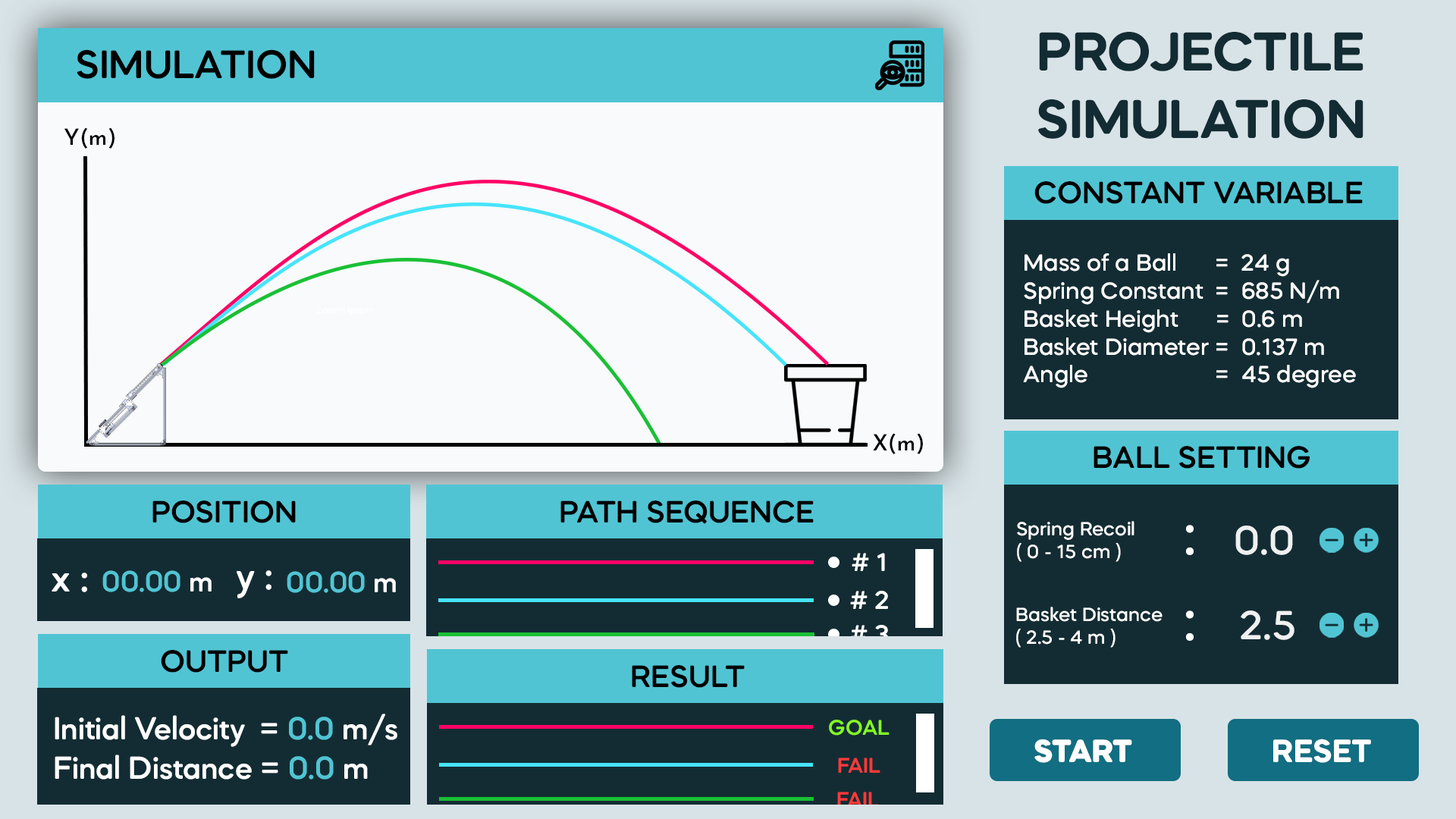
<style>
.page{position:relative;width:1456px;height:819px;background:#f8fafb}
.page>*{position:absolute;margin:0}
.t1{font:56.4px "MazzardSoftM-Bold";color:#132c33}
.t2{font:41px "MazzardSoftM-SemiBold";color:#000000}
.t3{font:22.5px "JosefinSans-Medium";color:#000000}
.t4{font:31.9px "MazzardSoftM-SemiBold";color:#000000}
.t5{font:23.2px "MazzardSoftH-Medium";color:#ffffff}
.t6{font:9.1px "MazzardSoftH-Medium";color:#ffffff}
.t7{font:19px "MazzardSoftH-Medium";color:#ffffff}
.t8{font:54.9px "MazzardSoftH-Medium";color:#ffffff}
.t9{font:40.3px "MazzardSoftH-Medium";color:#ffffff}
.t10{font:26.4px "MazzardSoftM-SemiBold";color:#ffffff}
.t11{font:40.4px "MazzardSoftM-SemiBold";color:#ffffff}
.t12{font:30.3px "MazzardSoftM-SemiBold";color:#51c4d3}
.t13{font:30.3px "MazzardSoftM-SemiBold";color:#ffffff}
.t14{font:26.4px "MazzardSoftM-SemiBold"}
.t15{font:32.9px "MazzardSoftM-SemiBold";color:#ffffff}
.t16{font:32.9px "MazzardSoftM-SemiBold";color:#51c4d3}
.t17{font:22px "MazzardSoftM-SemiBold";color:#84fa24}
.t18{font:32.1px "MazzardSoftH-ExtraBold";color:#ffffff}
.t19{font:32.1px "MazzardSoftH-Bold";color:#ffffff}
.t20{font:22px "MazzardSoftM-SemiBold";color:#fe3a3a}
.t21{font:22px "MazzardSoftM-SemiBold";color:#ff3939}
</style>
<div class="page">
<p class="t1" style="left:1038px;top:32px;width:325px;height:107px;text-align:center">PROJECTILE<br>SIMULATION</p>
<p class="t2" style="left:77px;top:49px;width:238px;height:30px">SIMULATION</p>
<p class="t3" style="left:64px;top:127px;width:51px;height:22px">Y(m)</p>
<p class="t4" style="left:1034px;top:181px;width:329px;height:23px">CONSTANT VARIABLE</p>
<p class="t5" style="left:1023px;top:253px;width:333px;height:135px">Mass of a Ball      =  24 g<br>Spring Constant  =  685 N/m<br>Basket Height      =  0.6 m<br>Basket Diameter =  0.137 m<br>Angle                     =  45 degree</p>
<p class="t6" style="left:317px;top:306px;width:57px;height:9px">Lorem Ipsum</p>
<p class="t3" style="left:873px;top:433px;width:50px;height:21px">X(m)</p>
<p class="t4" style="left:1094px;top:446px;width:216px;height:23px">BALL SETTING</p>
<p class="t4" style="left:152px;top:500px;width:144px;height:23px">POSITION</p>
<p class="t4" style="left:560px;top:500px;width:254px;height:24px">PATH SEQUENCE</p>
<p class="t7" style="left:1017px;top:521px;width:117px;height:41px">Spring Recoil <br>( 0 - 15 cm )</p>
<p class="t8" style="left:1186px;top:525px;width:8px;height:30px">:</p>
<p class="t9" style="left:1235px;top:526px;width:58px;height:29px;opacity:0.9">0.0</p>
<p class="t10" style="left:852px;top:553px;width:33px;height:18px"># 1</p>
<p class="t11" style="left:52px;top:573px;width:35px;height:19px">x :</p>
<p class="t12" style="left:102px;top:570px;width:110px;height:22px">00.00<span class="t13"> m</span></p>
<p class="t11" style="left:237px;top:570px;width:34px;height:28px">y :</p>
<p class="t12" style="left:287px;top:571px;width:109px;height:22px">00.00<span class="t13"> m</span></p>
<p class="t10" style="left:850px;top:591px;width:38px;height:18px"># 2</p>
<p class="t7" style="left:1016px;top:607px;width:147px;height:41px">Basket Distance <br>( 2.5 - 4 m )</p>
<p class="t8" style="left:1186px;top:610px;width:8px;height:31px">:</p>
<p class="t9" style="left:1241px;top:610px;width:53px;height:30px;opacity:0.9">2.5</p>
<p class="t14" style="left:850px;top:625px;width:39px;height:19px"># 3</p>
<p class="t4" style="left:161px;top:650px;width:127px;height:23px">OUTPUT</p>
<p class="t4" style="left:632px;top:665px;width:113px;height:23px">RESULT</p>
<p class="t15" style="left:55px;top:714px;width:342px;height:66px">Initial Velocity = <span class="t16">0.0</span> m/s<br>Final Distance = <span class="t16">0.0</span> m</p>
<p class="t17" style="left:829px;top:720px;width:61px;height:16px">GOAL</p>
<p class="t18" style="left:1034px;top:739px;width:98px;height:24px">START</p>
<p class="t19" style="left:1273px;top:739px;width:98px;height:24px">RESET</p>
<p class="t20" style="left:838px;top:758px;width:42px;height:15px">FAIL</p>
<p class="t21" style="left:837px;top:792px;width:43px;height:15px">FAIL</p>
</div>
